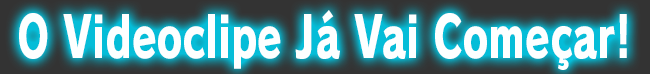
<style>
.page{position:relative;width:650px;height:74px;background:#fdffff}
.page>*{position:absolute;margin:0}
.t1{font:56px "RodinPro-EB";color:#fdffff;scale:0.71 1}
</style>
<div class="page">
<p class="t1" style="left:19px;top:10px;width:608px;height:60px">O Videoclipe Já Vai Começar!</p>
</div>
